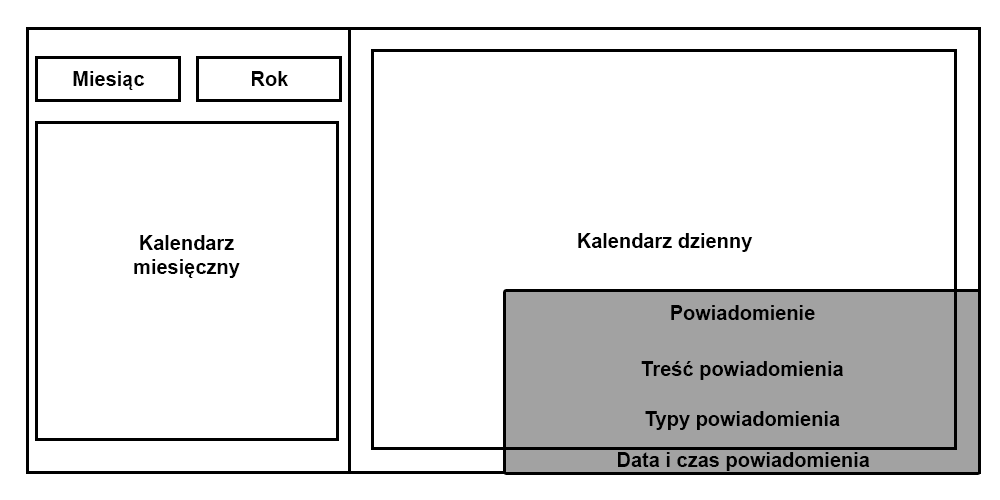
<style>
.page{position:relative;width:1000px;height:500px;background:#ffffff}
.page>*{position:absolute;margin:0}
.t1{font:20px "Arial-BoldMT";color:#000000}
</style>
<div class="page">
<p class="t1" style="left:73px;top:71px;width:72px;height:19px">Miesiąc</p>
<p class="t1" style="left:252px;top:71px;width:36px;height:15px">Rok</p>
<p class="t1" style="left:578px;top:233px;width:175px;height:19px">Kalendarz dzienny</p>
<p class="t1" style="left:134px;top:235px;width:106px;height:43px;text-align:center">Kalendarz<br>miesięczny</p>
<p class="t1" style="left:671px;top:305px;width:144px;height:15px">Powiadomienie</p>
<p class="t1" style="left:641px;top:361px;width:202px;height:19px">Treść powiadomienia</p>
<p class="t1" style="left:645px;top:411px;width:195px;height:19px">Typy powiadomienia</p>
<p class="t1" style="left:618px;top:452px;width:252px;height:19px">Data i czas powiadomienia</p>
</div>
